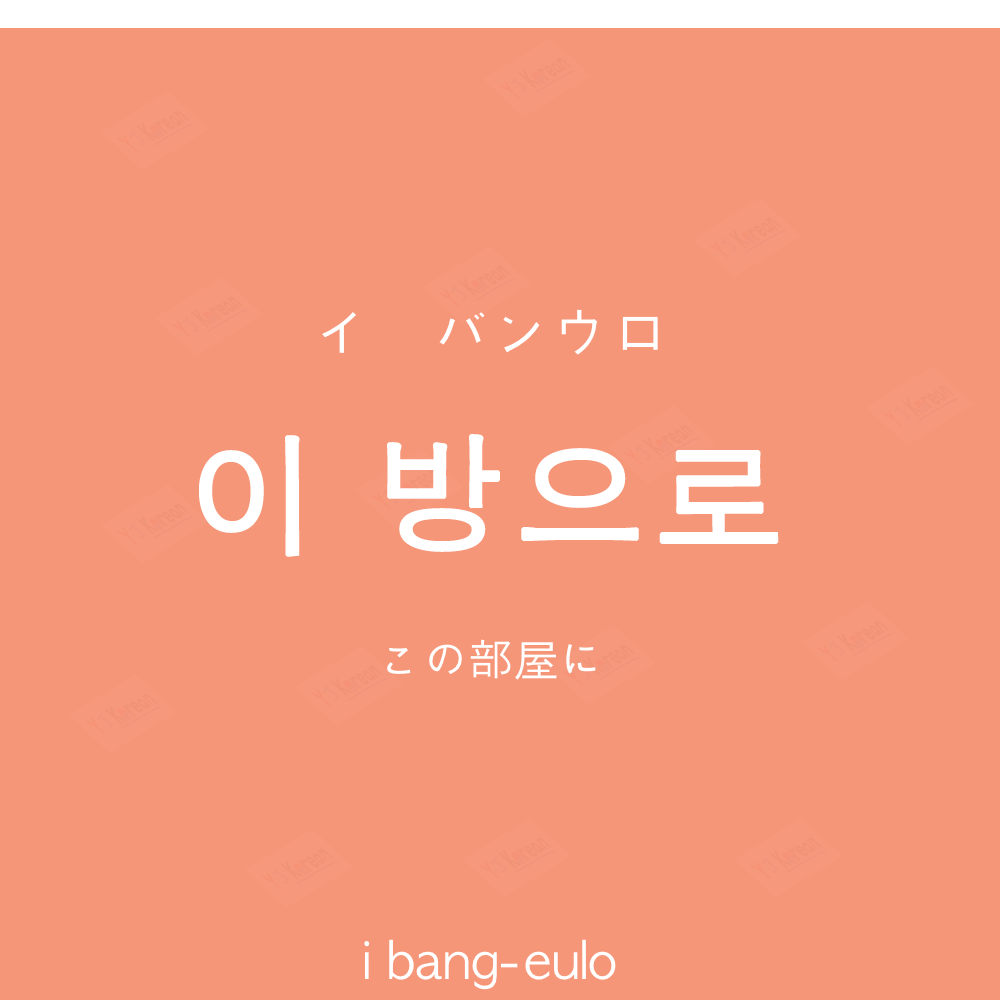
<style>
.page{position:relative;width:1000px;height:1000px;background:#f69679}
.page>*{position:absolute;margin:0}
.t1{font:60px "AppleGothic";color:#ffffff}
.t2{font:130px "AppleGothic";letter-spacing:0.04em;color:#ffffff;font-weight:bold}
.t3{font:45px "AppleGothic";color:#ffffff}
.t4{font:50px "AppleGothic";color:#ffffff}
</style>
<div class="page">
<p class="t1" style="left:322px;top:309px;width:336px;height:46px">イ　バンウロ</p>
<p class="t2" style="left:199px;top:434px;width:580px;height:123px">이 방으로</p>
<p class="t3" style="left:387px;top:639px;width:209px;height:41px">この部屋に</p>
<p class="t4" style="left:364px;top:939px;width:252px;height:51px">i bang-eulo</p>
</div>
